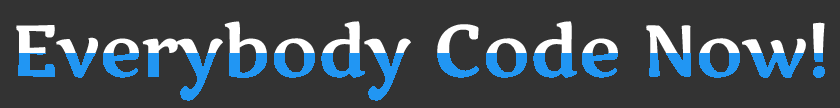
<style>
.page{position:relative;width:840px;height:108px;background:#333333}
.page>*{position:absolute;margin:0}
.t1{font:72px "MarkoOne-Regular"}
</style>
<div class="page">
<p class="t1" style="left:16px;top:21px;width:809px;height:80px">Everybody Code Now!</p>
</div>
